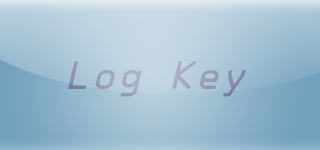
<style>
.page{position:relative;width:320px;height:150px}
.page>*{position:absolute;margin:0}
.t1{font:37px "OCRAStd";color:#9a9eb7}
</style>
<div class="page">
<p class="t1" style="left:68px;top:61px;width:178px;height:36px">Log Key</p>
</div>
